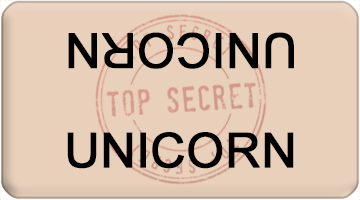
<style>
.page{position:relative;width:360px;height:200px;background:#e8d0bb}
.page>*{position:absolute;margin:0}
.t1{font:48px "ArialMT";color:#000000;font-weight:bold}
</style>
<div class="page">
<p class="t1" style="left:68px;top:32px;width:226px;height:37px;rotate:180deg">UNICORN</p>
<p class="t1" style="left:67px;top:132px;width:227px;height:37px">UNICORN</p>
</div>
